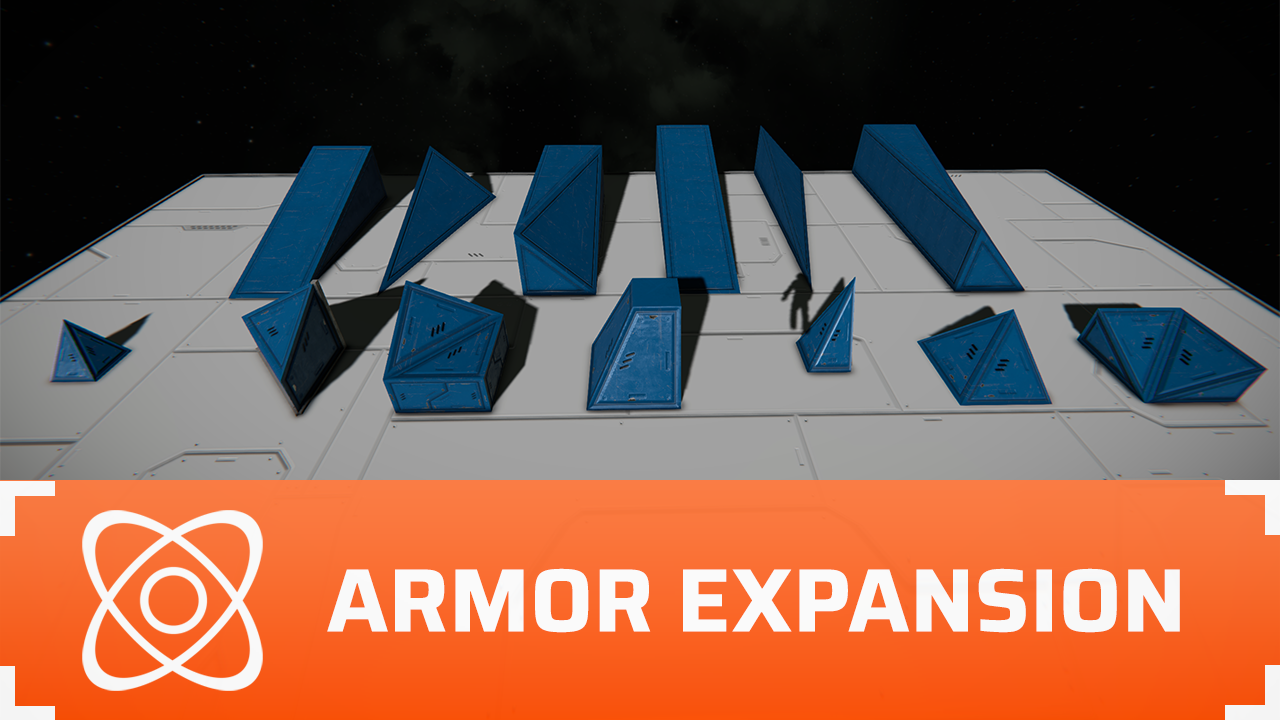
<style>
.page{position:relative;width:1280px;height:720px}
.page>*{position:absolute;margin:0}
.t1{font:90px "SairaRoman-Bold";color:#ffffff;text-transform:uppercase;font-weight:bold}
</style>
<div class="page">
<p class="t1" style="left:327px;top:568px;width:853px;height:65px">Armor Expansion</p>
</div>
